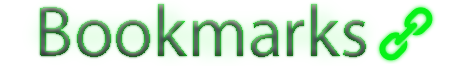
<style>
.page{position:relative;width:468px;height:70px;background:#ffffff}
.page>*{position:absolute;margin:0}
.t1{font:72.7px "MyriadPro-Regular"}
</style>
<div class="page">
<p class="t1" style="left:40px;top:4px;width:326px;height:53px">Bookmarks</p>
</div>
